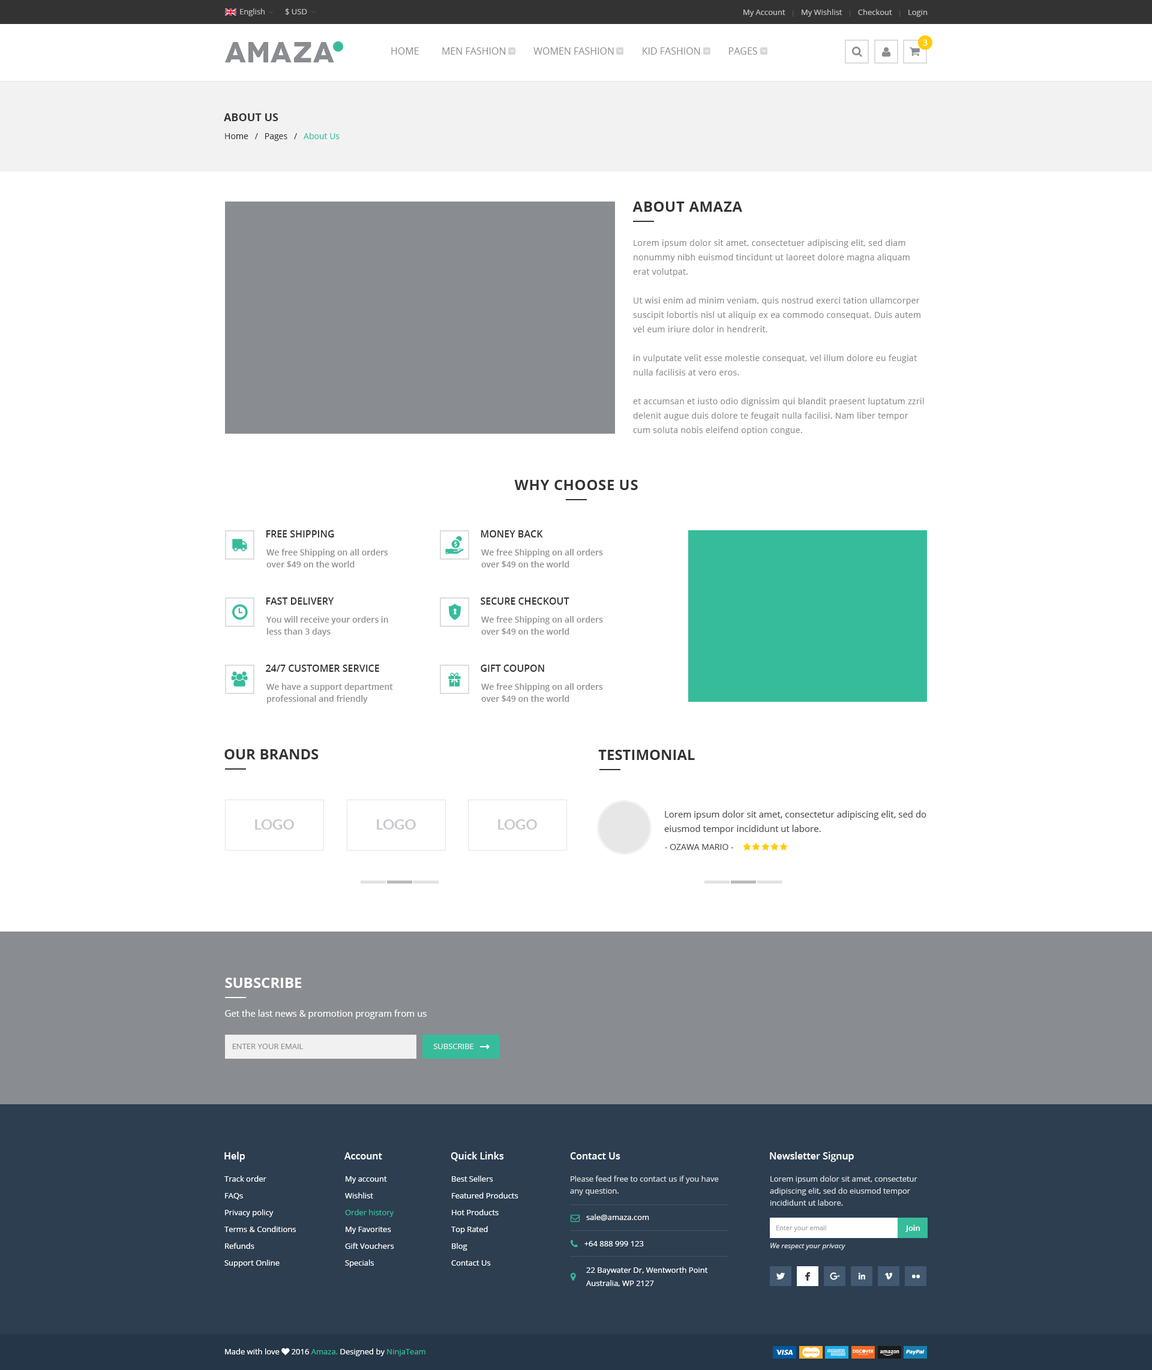
<style>
.page{position:relative;width:1152px;height:1370px;background:#ffffff}
.page>*{position:absolute;margin:0}
.t1{font:7.8px "OpenSans";color:#bdbdbf}
.t2{font:7.8px "OpenSans";color:#bebebf}
.t3{font:6.6px "OpenSans";color:#595959}
.t4{font:8.4px "OpenSans";letter-spacing:0.025em;color:#ffffff;text-transform:uppercase}
.t5{font:28.8px "Novecentowide-Bold";letter-spacing:0.025em;color:#898c90;text-transform:uppercase}
.t6{font:9.6px "OpenSans";color:#898c90;text-transform:uppercase}
.t7{font:10.8px "OpenSans-Bold";color:#333333;text-transform:uppercase}
.t8{font:8.4px "OpenSans";color:#333333}
.t9{font:8.4px "OpenSans";color:#37bc9b}
.t10{font:14.4px "OpenSans-Bold";letter-spacing:0.025em;color:#333333;text-transform:uppercase}
.t11{font:8.4px/14.4px "OpenSans";letter-spacing:0.025em;color:#898c90}
.t12{font:9.6px "OpenSans-Semibold";color:#333333;text-transform:uppercase}
.t13{font:8.4px/12px "OpenSans-Semibold";color:#8e8e93}
.t14{font:14.4px "OpenSans-Bold";color:#333333;text-transform:uppercase}
.t15{font:14.4px "Lato-Bold";color:#c7c7cc}
.t16{font:9px/14.4px "OpenSans";color:#4a4a4a}
.t17{font:8.4px "OpenSans";color:#4a4a4a;text-transform:uppercase}
.t18{font:14.4px "OpenSans-Bold";color:#ffffff;text-transform:uppercase}
.t19{font:9px "OpenSans";color:#ffffff}
.t20{font:7.8px "OpenSans";color:#8e8e93;text-transform:uppercase}
.t21{font:7.8px "OpenSans";color:#f1f1f1;text-transform:uppercase}
.t22{font:9.6px "OpenSans-Semibold";color:#ffffff}
.t23{font:7.8px/16.8px "OpenSans";color:#ffffff}
.t24{font:7.8px/16.8px "OpenSans";color:#37bc9b}
.t25{font:7.8px/13.2px "OpenSans";color:#ffffff}
.t26{font:7.8px/12px "OpenSans";color:#dbddde}
.t27{font:6.6px "OpenSans";color:#a3a2a2}
.t28{font:7.8px "OpenSans-Semibold";color:#ffffff}
</style>
<div class="page">
<p class="t1" style="left:240px;top:8px;width:25px;height:8px">English</p>
<p class="t1" style="left:285px;top:8px;width:22px;height:7px">$ USD</p>
<p class="t2" style="left:743px;top:9px;width:185px;height:8px">My Account   <span class="t3">|</span>   My Wishlist   <span class="t3">|</span>   Checkout   <span class="t3">| </span>  Login</p>
<p class="t4" style="left:923px;top:40px;width:5px;height:6px">3</p>
<p class="t5" style="left:225px;top:42px;width:109px;height:20px">AMAZA</p>
<p class="t6" style="left:391px;top:47px;width:366px;height:8px">Home         Men Fashion           Women Fashion           Kid Fashion           Pages</p>
<p class="t7" style="left:224px;top:113px;width:54px;height:8px">About Us</p>
<p class="t8" style="left:225px;top:133px;width:115px;height:8px">Home   /   Pages   /   <span class="t9">About Us</span></p>
<p class="t10" style="left:632px;top:202px;width:110px;height:10px">About Amaza</p>
<p class="t11" style="left:633px;top:239px;width:291px;height:196px">Lorem ipsum dolor sit amet, consectetuer adipiscing elit, sed diam nonummy nibh euismod tincidunt ut laoreet dolore magna aliquam erat volutpat. <br><br>Ut wisi enim ad minim veniam, quis nostrud exerci tation ullamcorper suscipit lobortis nisl ut aliquip ex ea commodo consequat. Duis autem vel eum iriure dolor in hendrerit.<br><br>in vulputate velit esse molestie consequat, vel illum dolore eu feugiat nulla facilisis at vero eros.<br><br>et accumsan et iusto odio dignissim qui blandit praesent luptatum zzril delenit augue duis dolore te feugait nulla facilisi. Nam liber tempor cum soluta nobis eleifend option congue.</p>
<p class="t10" style="left:514px;top:480px;width:124px;height:10px">Why Choose Us</p>
<p class="t12" style="left:266px;top:530px;width:68px;height:8px">Free Shipping</p>
<p class="t12" style="left:481px;top:530px;width:62px;height:8px">Money Back</p>
<p class="t13" style="left:266px;top:549px;width:122px;height:19px">We free Shipping on all orders over $49 on the world</p>
<p class="t13" style="left:481px;top:549px;width:122px;height:19px">We free Shipping on all orders over $49 on the world</p>
<p class="t12" style="left:266px;top:598px;width:68px;height:7px">Fast Delivery</p>
<p class="t12" style="left:481px;top:598px;width:88px;height:7px">Secure Checkout</p>
<p class="t13" style="left:266px;top:616px;width:122px;height:21px">You will receive your orders in less than 3 days</p>
<p class="t13" style="left:481px;top:616px;width:122px;height:19px">We free Shipping on all orders over $49 on the world</p>
<p class="t12" style="left:266px;top:665px;width:113px;height:7px">24/7 customer service</p>
<p class="t12" style="left:481px;top:665px;width:63px;height:7px">Gift Coupon</p>
<p class="t13" style="left:266px;top:683px;width:127px;height:21px">We have a support department professional and friendly</p>
<p class="t13" style="left:481px;top:683px;width:122px;height:19px">We free Shipping on all orders over $49 on the world</p>
<p class="t14" style="left:224px;top:749px;width:95px;height:11px">Our Brands</p>
<p class="t14" style="left:598px;top:750px;width:97px;height:10px">Testimonial</p>
<p class="t15" style="left:255px;top:820px;width:39px;height:10px">LOGO</p>
<p class="t15" style="left:377px;top:820px;width:39px;height:10px">LOGO</p>
<p class="t15" style="left:498px;top:820px;width:39px;height:10px">LOGO</p>
<p class="t16" style="left:664px;top:811px;width:262px;height:24px">Lorem ipsum dolor sit amet, consectetur adipiscing elit, sed do eiusmod tempor incididunt ut labore.</p>
<p class="t17" style="left:665px;top:844px;width:68px;height:6px">- Ozawa Mario -</p>
<p class="t18" style="left:225px;top:978px;width:76px;height:10px">Subscribe</p>
<p class="t19" style="left:225px;top:1010px;width:202px;height:9px">Get the last news &amp; promotion program from us</p>
<p class="t20" style="left:232px;top:1044px;width:72px;height:5px">Enter your email</p>
<p class="t21" style="left:433px;top:1044px;width:41px;height:5px">Subscribe</p>
<p class="t22" style="left:224px;top:1152px;width:21px;height:10px">Help</p>
<p class="t22" style="left:344px;top:1153px;width:38px;height:7px">Account</p>
<p class="t22" style="left:451px;top:1152px;width:53px;height:10px">Quick Links</p>
<p class="t22" style="left:570px;top:1153px;width:50px;height:7px">Contact Us</p>
<p class="t22" style="left:770px;top:1152px;width:84px;height:10px">Newsletter Signup</p>
<p class="t23" style="left:224px;top:1176px;width:72px;height:92px">Track order<br>FAQs<br>Privacy policy<br>Terms &amp; Conditions<br>Refunds<br>Support Online</p>
<p class="t23" style="left:345px;top:1177px;width:49px;height:91px">My account<br>Wishlist<br><span class="t24">Order history<br></span>My Favorites<br>Gift Vouchers<br>Specials</p>
<p class="t23" style="left:451px;top:1176px;width:67px;height:90px">Best Sellers<br>Featured Products<br>Hot Products<br>Top Rated<br>Blog<br>Contact Us</p>
<p class="t25" style="left:570px;top:1176px;width:149px;height:111px"><span class="t26">Please feed free to contact us if you have any question.<br></span><br>        sale@amaza.com<br><br>       +64 888 999 123<br><br>        22 Baywater Dr, Wentworth Point<br>        Australia, WP 2127</p>
<p class="t27" style="left:776px;top:1226px;width:50px;height:6px">Enter your email</p>
<p class="t28" style="left:905px;top:1225px;width:15px;height:7px">Join</p>
</div>
